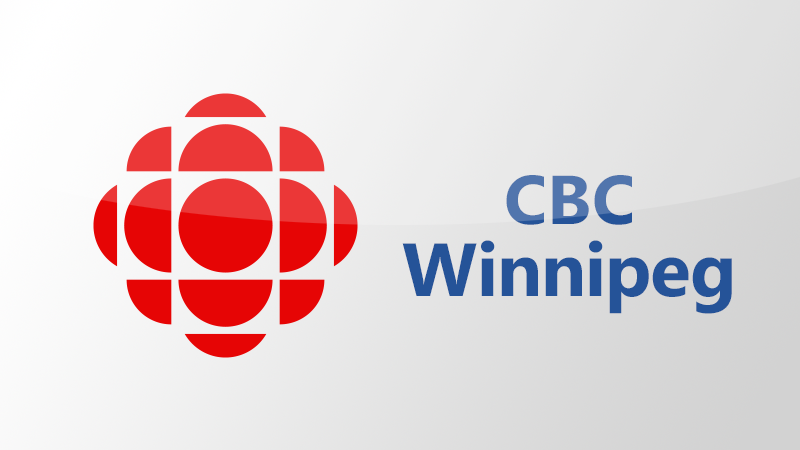
<style>
.page{position:relative;width:800px;height:450px}
.page>*{position:absolute;margin:0}
.t1{font:75px/72px "Ebrima-Bold";color:#255398}
.t2{font:69px/72px "Ebrima-Bold";color:#255398}
</style>
<div class="page">
<p class="t1" style="left:402px;top:175px;width:330px;height:139px;text-align:center"><span class="t2">CBC<br></span>Winnipeg</p>
</div>
